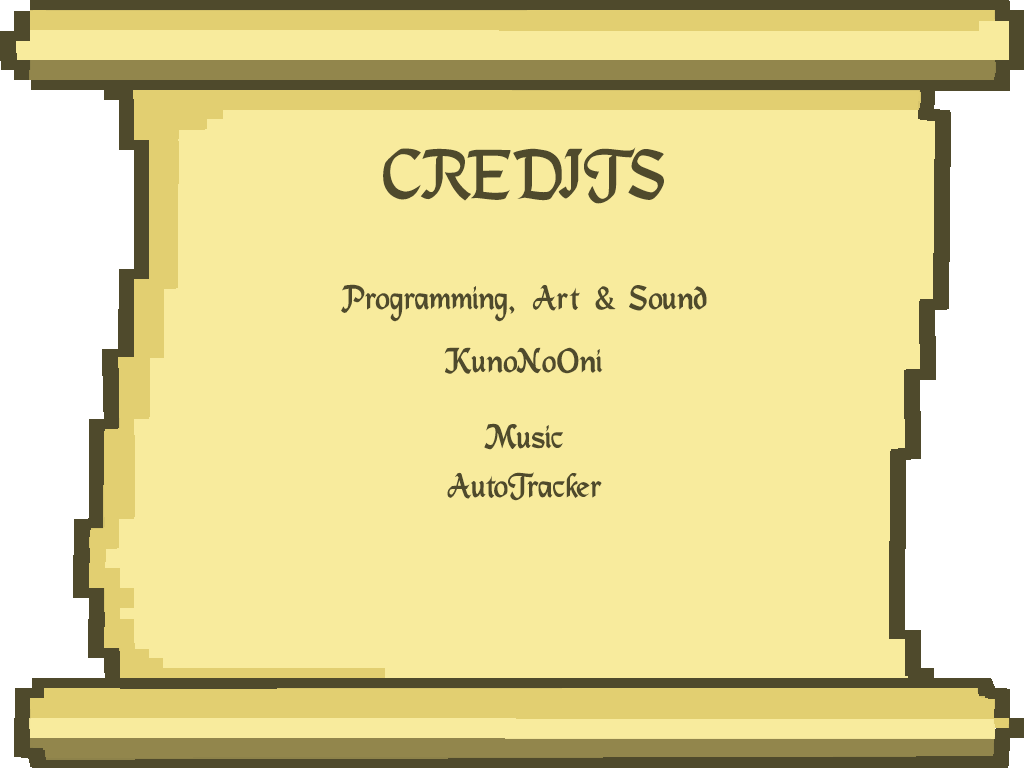
<style>
.page{position:relative;width:1024px;height:768px;background:#f8eb9d}
.page>*{position:absolute;margin:0}
.t1{font:72px "DS_Mysticora";color:#4f4a2c}
.t2{font:36px "DS_Mysticora";color:#4f4a2c}
</style>
<div class="page">
<p class="t1" style="left:383px;top:147px;width:281px;height:57px">CREDITS</p>
<p class="t2" style="left:341px;top:284px;width:366px;height:38px">Programming, Art &amp; Sound</p>
<p class="t2" style="left:444px;top:347px;width:159px;height:27px">KunoNoOni</p>
<p class="t2" style="left:484px;top:423px;width:79px;height:27px">Music</p>
<p class="t2" style="left:447px;top:472px;width:155px;height:29px">AutoTracker</p>
</div>
